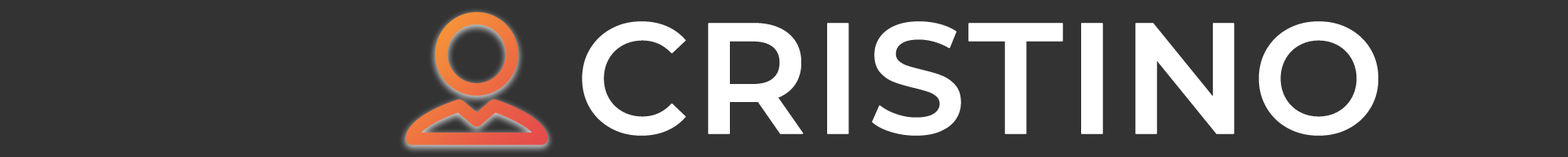
<style>
.page{position:relative;width:1568px;height:157px;background:#333333}
.page>*{position:absolute;margin:0}
.t1{font:156.8px "Montserrat-SemiBold";color:#ffffff;font-weight:bold}
</style>
<div class="page">
<p class="t1" style="left:582px;top:21px;width:796px;height:115px">CRISTINO</p>
</div>
